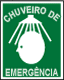
<style>
.page{position:relative;width:64px;height:80px;background:#007339}
.page>*{position:absolute;margin:0}
.t1{font:9px/12px "Arial-BoldMT";color:#dee7de;scale:0.87 1}
.t2{font:9.9px "Arial-BoldMT";color:#dee7de;scale:0.79 1}
</style>
<div class="page">
<p class="t1" style="left:3px;top:6px;width:58px;height:16px;text-align:center">CHUVEIRO DE</p>
<p class="t2" style="left:5px;top:66px;width:53px;height:10px">EMERGÊNCIA</p>
</div>
